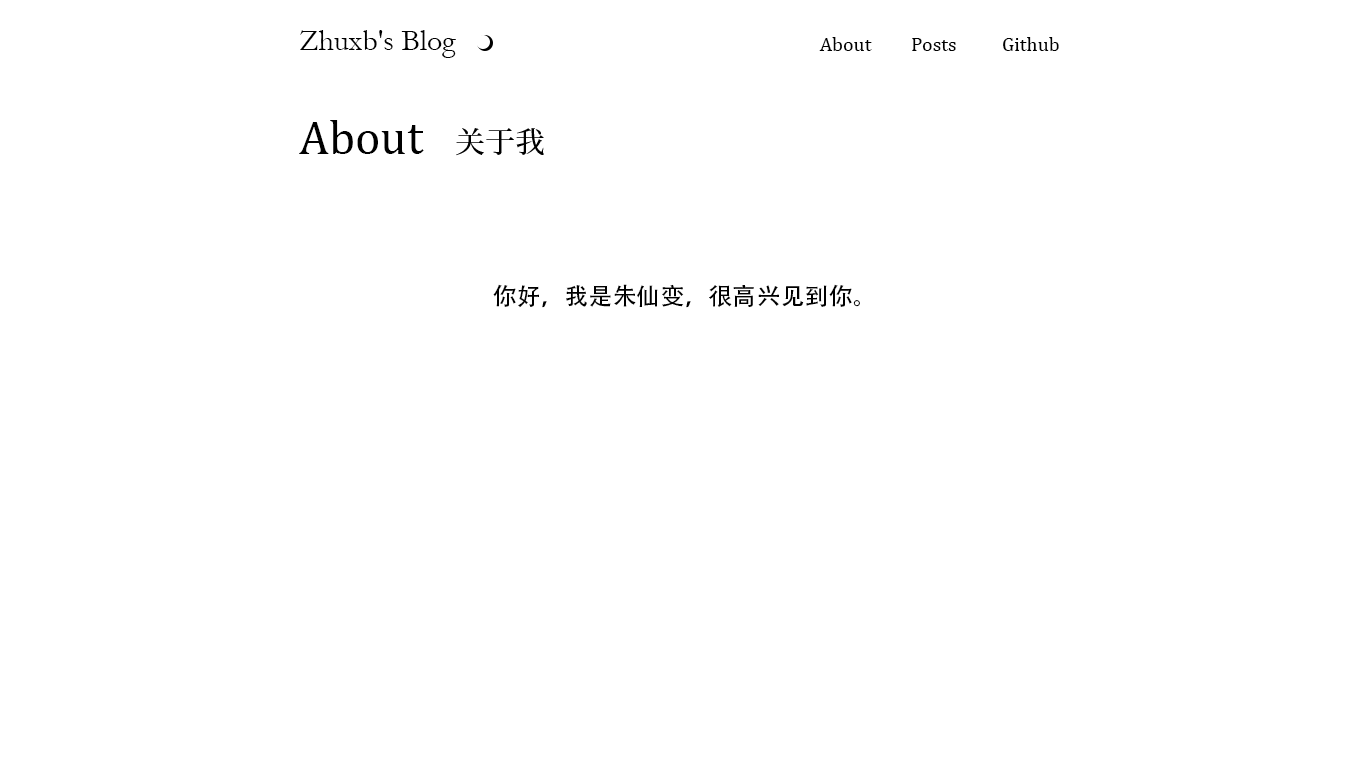
<style>
.page{position:relative;width:1366px;height:768px;background:#ffffff}
.page>*{position:absolute;margin:0}
.t1{font:30px "Garamond";color:#000000}
.t2{font:20px "Cambria";color:#000000}
.t3{font:48px "CambriaMath";color:#000000}
.t4{font:30px "SourceHanSerifCN-Medium";color:#000000}
.t5{font:24px "AdobeHeitiStd-Regular";color:#000000}
</style>
<div class="page">
<p class="t1" style="left:300px;top:30px;width:156px;height:28px">Zhuxb's Blog</p>
<p class="t2" style="left:819px;top:37px;width:53px;height:14px">About</p>
<p class="t2" style="left:912px;top:38px;width:44px;height:13px">Posts</p>
<p class="t2" style="left:1003px;top:37px;width:56px;height:14px">Github</p>
<p class="t3" style="left:299px;top:120px;width:125px;height:34px">About</p>
<p class="t4" style="left:456px;top:128px;width:88px;height:28px">关于我</p>
<p class="t5" style="left:493px;top:284px;width:367px;height:24px">你好，我是朱仙变，很高兴见到你。</p>
</div>
